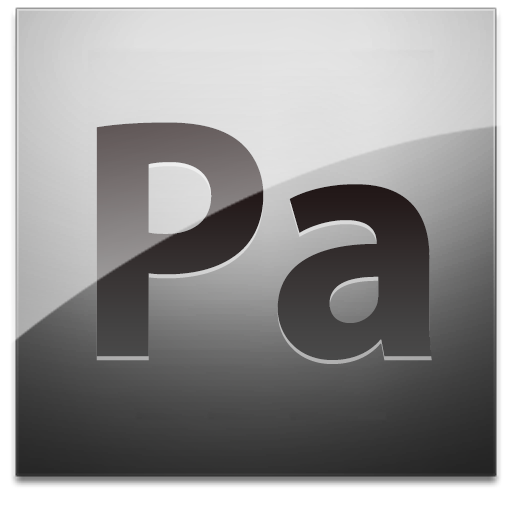
<style>
.page{position:relative;width:512px;height:512px}
.page>*{position:absolute;margin:0}
.t1{font:344.2px "MyriadPro-Bold"}
</style>
<div class="page">
<p class="t1" style="left:96px;top:122px;width:336px;height:238px">Pa</p>
</div>
